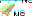
<style>
.page{position:relative;width:32px;height:16px;background:#ffffff}
.page>*{position:absolute;margin:0}
.t1{font:10px "ArialMT";letter-spacing:-0.1em}
</style>
<div class="page">
<p class="t1" style="left:14px;top:9px;width:11px;height:7px">NS</p>
</div>
